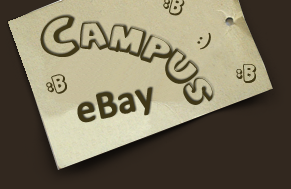
<style>
.page{position:relative;width:291px;height:189px;background:#32281f}
.page>*{position:absolute;margin:0}
.t1{font:24.4px "AgentOrange";color:#403716}
.t2{font:35.8px "AgentOrange";color:#403716}
.t3{font:19px "ArnoPro-Subhead";color:#403716;font-weight:bold}
.t4{font:17px "AgentOrange";color:#403716}
.t5{font:38.7px "Calibri";color:#403716;font-weight:bold}
</style>
<div class="page">
<p class="t1" style="left:40px;top:16px;width:173px;height:89px;rotate:19deg"><span class="t2">c</span>ampus</p>
<p class="t3" style="left:197px;top:32px;width:14px;height:18px;rotate:28deg">:)</p>
<p class="t4" style="left:236px;top:64px;width:21px;height:19px">:B</p>
<p class="t4" style="left:46px;top:74px;width:21px;height:20px;rotate:-16deg">:B</p>
<p class="t5" style="left:77px;top:88px;width:75px;height:35px;rotate:-13deg">eBay</p>
</div>
